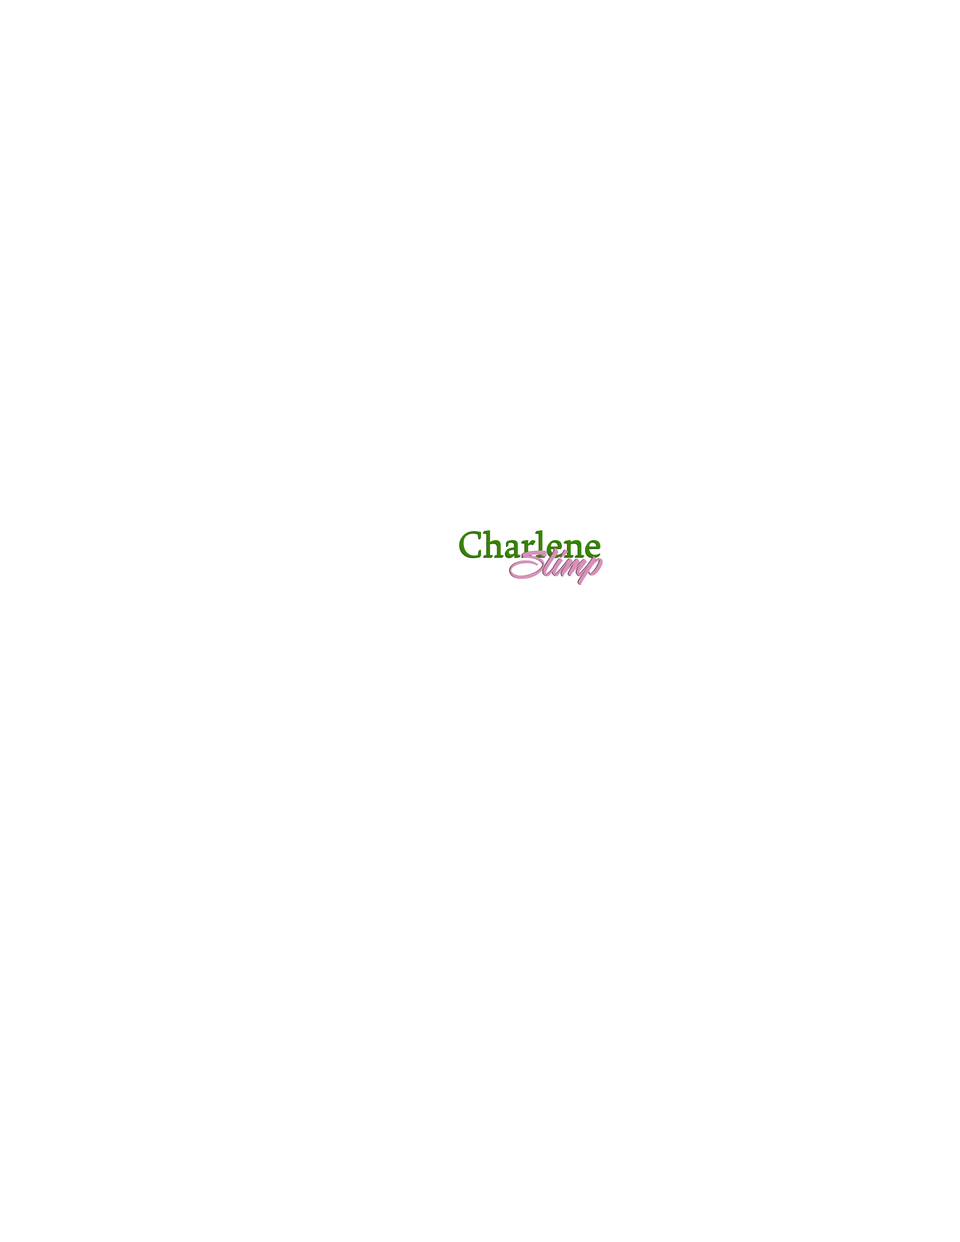
<style>
.page{position:relative;width:960px;height:1242px;background:#ffffff}
.page>*{position:absolute;margin:0}
.t1{font:37.6px "Sylfaen"}
.t2{font:37.6px "Sylfaen";color:#358600}
.t3{font:47.1px "SarahScript-Regular";color:#d991ba}
</style>
<div class="page">
<p class="t1" style="left:459px;top:532px;width:141px;height:26px">Charlene</p>
<p class="t2" style="left:460px;top:530px;width:140px;height:27px">Charlene</p>
<p class="t3" style="left:509px;top:548px;width:93px;height:37px">Slimp</p>
<p class="t3" style="left:510px;top:548px;width:93px;height:37px">Slimp</p>
</div>
